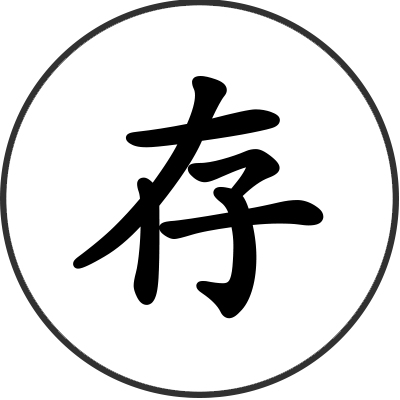
<style>
.page{position:relative;width:400px;height:400px;background:#ffffff}
.page>*{position:absolute;margin:0}
.t1{font:266.7px "STKaiti";color:#000000;font-weight:bold}
</style>
<div class="page">
<p class="t1" style="left:73px;top:76px;width:251px;height:243px">存</p>
</div>
